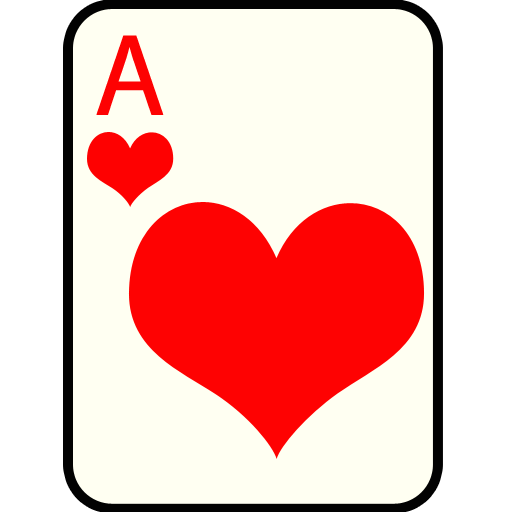
<style>
.page{position:relative;width:512px;height:512px;background:#fffff2}
.page>*{position:absolute;margin:0}
.t1{font:200px "MyriadPro-Regular";letter-spacing:-0.05em;color:#fd0202;font-variant:small-caps;font-weight:bold}
</style>
<div class="page">
<p class="t1" style="left:96px;top:35px;width:68px;height:80px">A</p>
</div>
